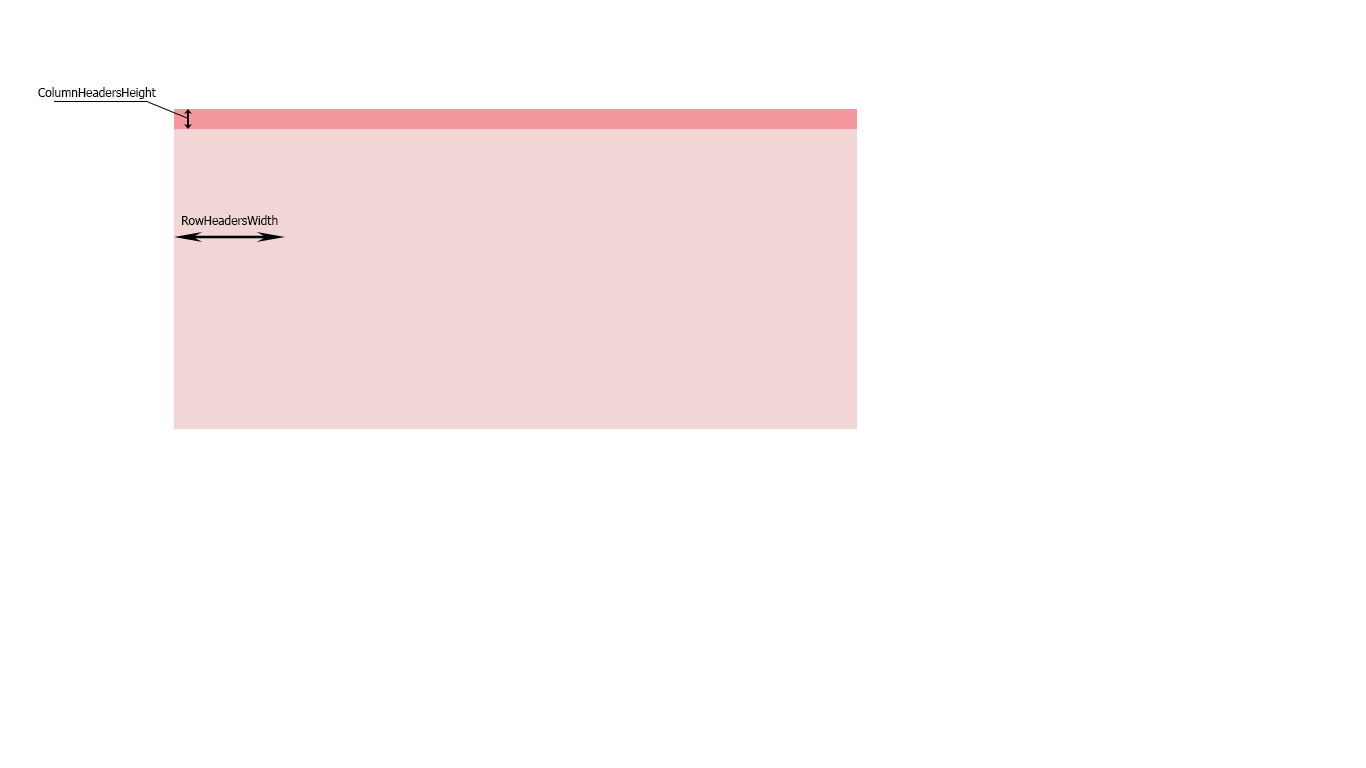
<style>
.page{position:relative;width:1366px;height:768px;background:#ffffff}
.page>*{position:absolute;margin:0}
.t1{font:12px "Tahoma";color:#000000}
</style>
<div class="page">
<p class="t1" style="left:38px;top:87px;width:118px;height:12px">ColumnHeadersHeight</p>
<p class="t1" style="left:182px;top:215px;width:96px;height:10px">RowHeadersWidth</p>
</div>
